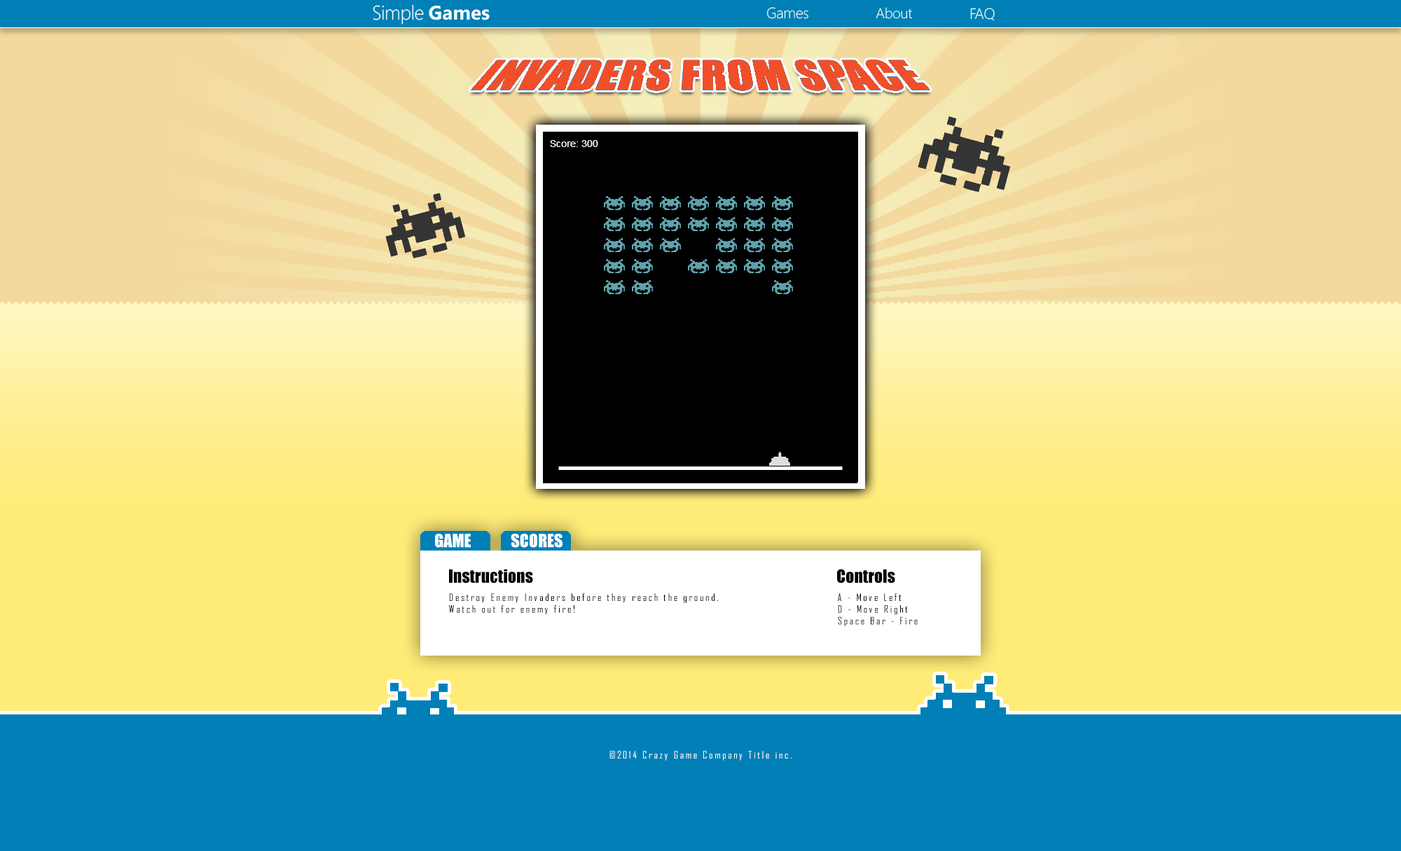
<style>
.page{position:relative;width:1401px;height:851px}
.page>*{position:absolute;margin:0}
.t1{font:16.8px "Impact";color:#ffffff}
.t2{font:16.8px "Impact";color:#000000}
.t3{font:9.8px "AgencyFB-Reg";letter-spacing:0.2em;color:#000000}
.t4{font:9.8px "AgencyFB-Reg";letter-spacing:0.2em;color:#ffffff}
</style>
<div class="page">
<p class="t1" style="left:435px;top:534px;width:36px;height:14px">GAME</p>
<p class="t1" style="left:511px;top:534px;width:52px;height:14px">SCORES</p>
<p class="t2" style="left:449px;top:570px;width:84px;height:14px">Instructions</p>
<p class="t2" style="left:837px;top:569px;width:58px;height:15px">Controls</p>
<p class="t3" style="left:449px;top:593px;width:269px;height:22px">Destroy Enemy Invaders before they reach the ground.  <br>Watch out for enemy fire!</p>
<p class="t3" style="left:838px;top:593px;width:80px;height:33px">A - Move Left<br>D - Move Right<br>Space Bar - Fire</p>
<p class="t4" style="left:609px;top:751px;width:183px;height:10px">©2014 Crazy Game Company Title inc.</p>
</div>
